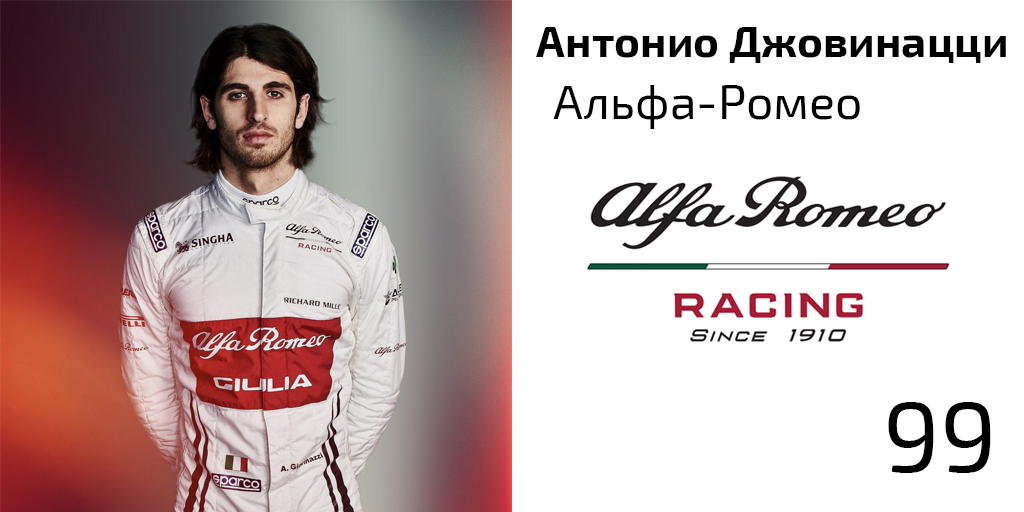
<style>
.page{position:relative;width:1024px;height:512px;background:#ffffff}
.page>*{position:absolute;margin:0}
.t1{font:44px "Exo2-Bold";color:#000000}
.t2{font:48px "Exo2-Regular";color:#000000}
.t3{font:100px "Exo2-Regular";color:#000000}
</style>
<div class="page">
<p class="t1" style="left:536px;top:27px;width:470px;height:36px">Антонио Джовинацци</p>
<p class="t2" style="left:553px;top:85px;width:307px;height:44px">Альфа-Ромео</p>
<p class="t3" style="left:888px;top:402px;width:103px;height:71px">99</p>
</div>
